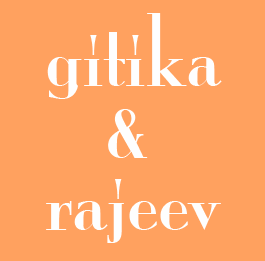
<style>
.page{position:relative;width:265px;height:261px;background:#ffa15f}
.page>*{position:absolute;margin:0}
.t1{font:92px/72px "MonaLisaSolidITCTT";color:#fefefe}
</style>
<div class="page">
<p class="t1" style="left:46px;top:13px;width:176px;height:230px;text-align:center">gitika<br>&amp; <br>rajeev</p>
</div>
